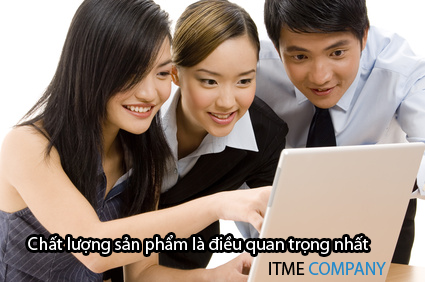
<style>
.page{position:relative;width:425px;height:282px}
.page>*{position:absolute;margin:0}
.t1{font:18px "MyriadPro-Regular";color:#ffffff}
.t2{font:18px "MyriadPro-Regular";color:#258acb}
.t3{font:18px "MyriadPro-Regular";color:#000000}
</style>
<div class="page">
<p class="t1" style="left:28px;top:235px;width:341px;height:19px">Chất lượng sản phẩm là điều quan trọng nhất</p>
<p class="t2" style="left:269px;top:262px;width:117px;height:13px"><span class="t3">ITME </span>COMPANY</p>
</div>
